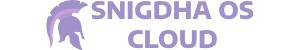
<style>
.page{position:relative;width:300px;height:50px;background:#ffffff}
.page>*{position:absolute;margin:0}
.t1{font:24px "EncodeSansSemiExpanded-ExtraBold";color:#a091c9}
</style>
<div class="page">
<p class="t1" style="left:91px;top:1px;width:163px;height:48px;text-align:center">SNIGDHA OS CLOUD</p>
</div>
